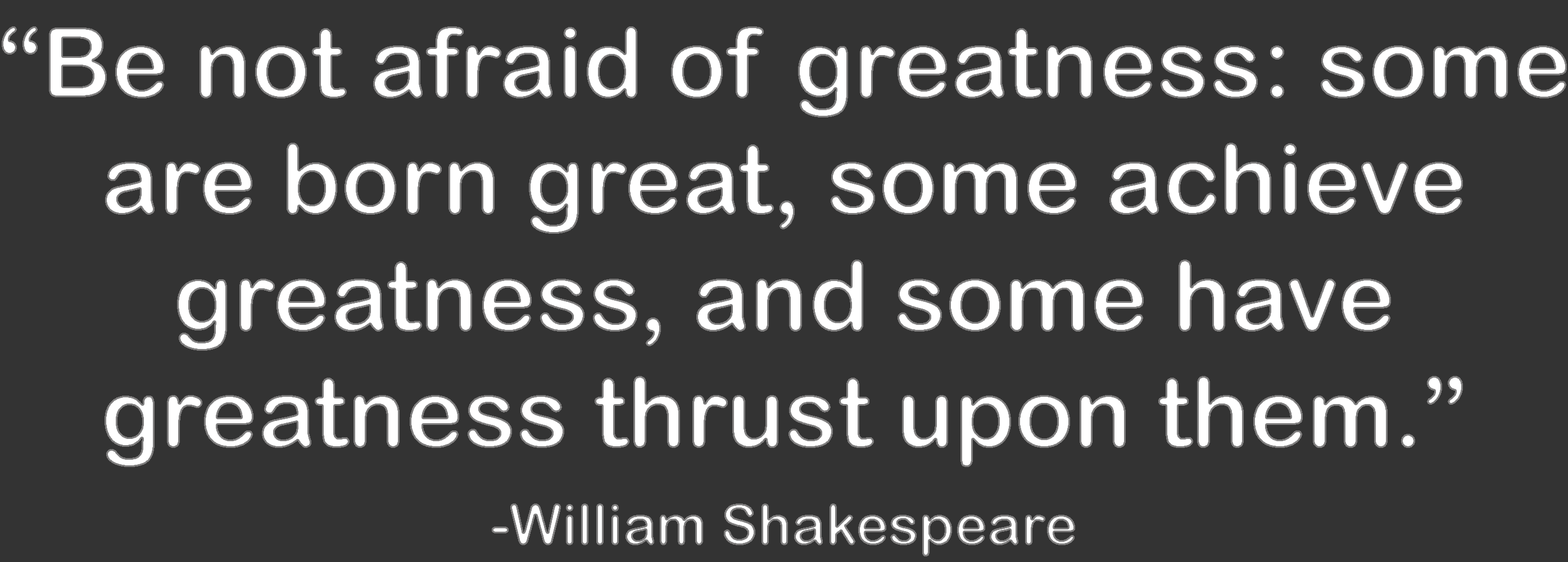
<style>
.page{position:relative;width:1568px;height:562px;background:#333333}
.page>*{position:absolute;margin:0}
.t1{font:97px "ArialRoundedMTBold";color:#ffffff}
.t2{font:1.4px "ArialRoundedMTBold";color:#ffffff}
.t3{font:56.2px "ArialRoundedMTBold";color:#ffffff}
</style>
<div class="page">
<p class="t1" style="left:2px;top:26px;width:1565px;height:530px;text-align:center">“Be not afraid of greatness: some<br>are born great, some achieve<br>greatness, and some have<br>greatness thrust upon them.”<span class="t2"><br><br><br><br><br><br><br><br><br><br><br><br><br><br><br><br><br><br><br></span><span class="t3">-William Shakespeare</span></p>
</div>
